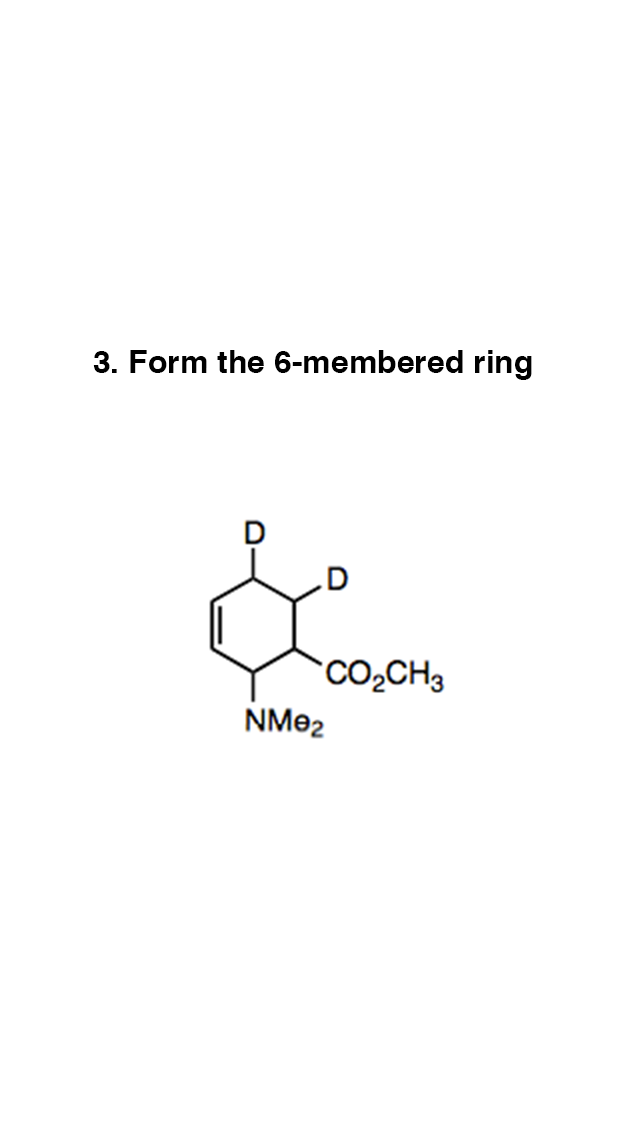
<style>
.page{position:relative;width:640px;height:1136px;background:#ffffff}
.page>*{position:absolute;margin:0}
.t1{font:32px "Helvetica-Bold";color:#000000}
</style>
<div class="page">
<p class="t1" style="left:93px;top:350px;width:439px;height:30px">3. Form the 6-membered ring</p>
</div>
